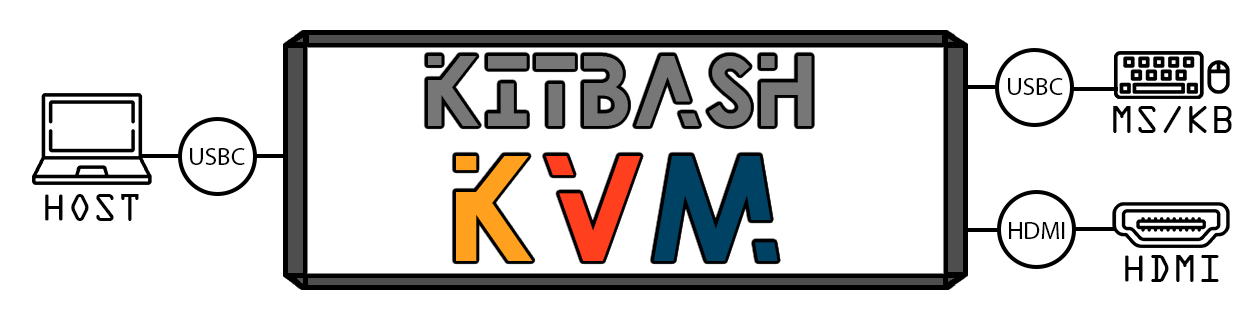
<style>
.page{position:relative;width:1250px;height:320px;background:#ffffff}
.page>*{position:absolute;margin:0}
.t1{font:25px "MyriadPro-Regular";color:#000000}
.t2{font:41.7px "OCRAExtended";color:#000000}
.t3{font:150px "ProcrastinatingPixie";color:#ffa01e}
.t4{font:150px "ProcrastinatingPixie";color:#ff3f1e}
.t5{font:150px "ProcrastinatingPixie";color:#004264}
</style>
<div class="page">
<p class="t1" style="left:1008px;top:78px;width:55px;height:17px">USBC</p>
<p class="t2" style="left:1113px;top:106px;width:119px;height:27px">MS/KB</p>
<p class="t1" style="left:190px;top:148px;width:55px;height:17px">USBC</p>
<p class="t3" style="left:456px;top:156px;width:322px;height:105px">K<span class="t4">V</span><span class="t5">M</span></p>
<p class="t2" style="left:45px;top:194px;width:94px;height:27px">HOST</p>
<p class="t1" style="left:1009px;top:222px;width:56px;height:17px">HDMI</p>
<p class="t2" style="left:1125px;top:255px;width:94px;height:27px">HDMI</p>
</div>
